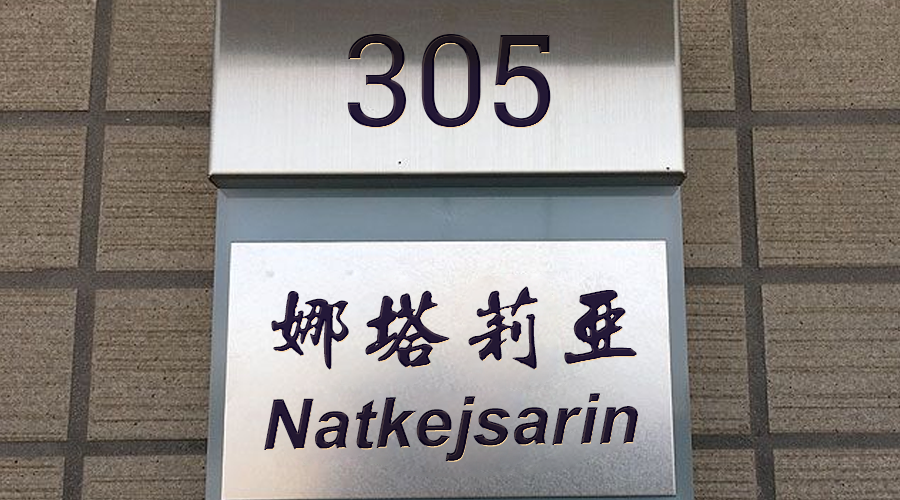
<style>
.page{position:relative;width:900px;height:500px}
.page>*{position:absolute;margin:0}
.t1{font:130.2px "RobotoSlab-Regular";color:#0f0530}
.t2{font:96.9px "SunYatsenHsingshu-";color:#0f0530}
.t3{font:70.3px "Arial-BoldItalicMT";color:#0f0530}
</style>
<div class="page">
<p class="t1" style="left:347px;top:34px;width:204px;height:94px">305</p>
<p class="t2" style="left:271px;top:286px;width:366px;height:84px;rotate:-1deg">娜塔莉亚</p>
<p class="t3" style="left:264px;top:393px;width:374px;height:69px;rotate:-1deg">Natkejsarin</p>
</div>
